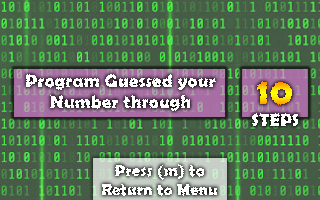
<style>
.page{position:relative;width:320px;height:200px}
.page>*{position:absolute;margin:0}
.t1{font:18px "BerlinSansFBDemi-Bold";letter-spacing:0.025em;color:#ffffff}
.t2{font:36px "BerlinSansFBDemi-Bold";letter-spacing:0.025em}
.t3{font:16px "BerlinSansFBDemi-Bold";letter-spacing:0.025em;color:#ffffff}
</style>
<div class="page">
<p class="t1" style="left:26px;top:74px;width:190px;height:37px;text-align:center">Program Guessed your Number through</p>
<p class="t2" style="left:257px;top:81px;width:35px;height:24px">10</p>
<p class="t1" style="left:251px;top:113px;width:48px;height:14px">STEPS</p>
<p class="t3" style="left:102px;top:164px;width:115px;height:32px;text-align:center">Press (m) to<br>Return to Menu</p>
</div>
